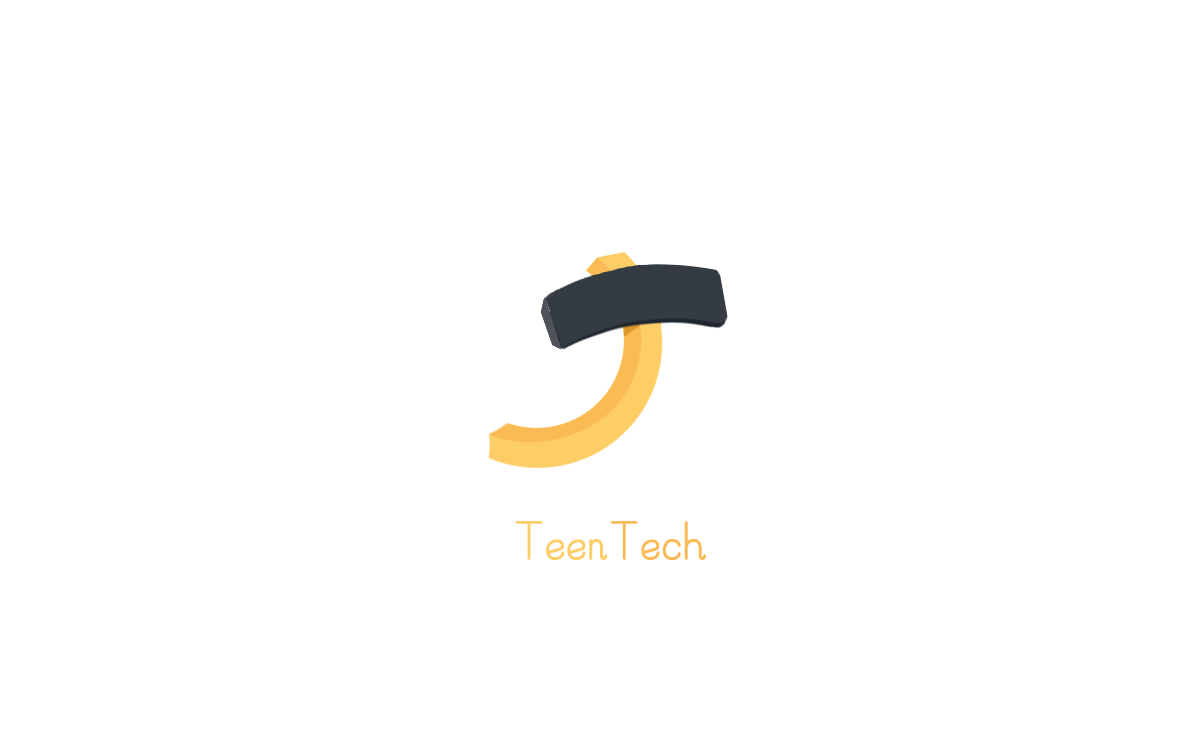
<style>
.page{position:relative;width:1200px;height:738px;background:#ffffff}
.page>*{position:absolute;margin:0}
.t1{font:48px "PreCursive_Regular";letter-spacing:0.05em;color:#fece66}
.t2{font:48px "PreCursive_Regular";letter-spacing:0.05em;color:#faba54}
</style>
<div class="page">
<p class="t1" style="left:515px;top:520px;width:191px;height:40px">Teen<span class="t2">Tech</span></p>
</div>
